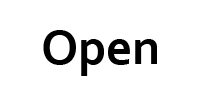
<style>
.page{position:relative;width:197px;height:100px;background:#ffffff}
.page>*{position:absolute;margin:0}
.t1{font:50.8px "Corbel-Bold";color:#000000}
</style>
<div class="page">
<p class="t1" style="left:43px;top:30px;width:114px;height:46px">Open</p>
</div>
